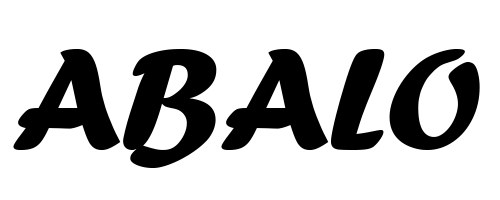
<style>
.page{position:relative;width:500px;height:200px;background:#ffffff}
.page>*{position:absolute;margin:0}
.t1{font:150px "ForteMT";color:#000000;text-transform:uppercase}
</style>
<div class="page">
<p class="t1" style="left:13px;top:49px;width:467px;height:119px">ABALO</p>
</div>
